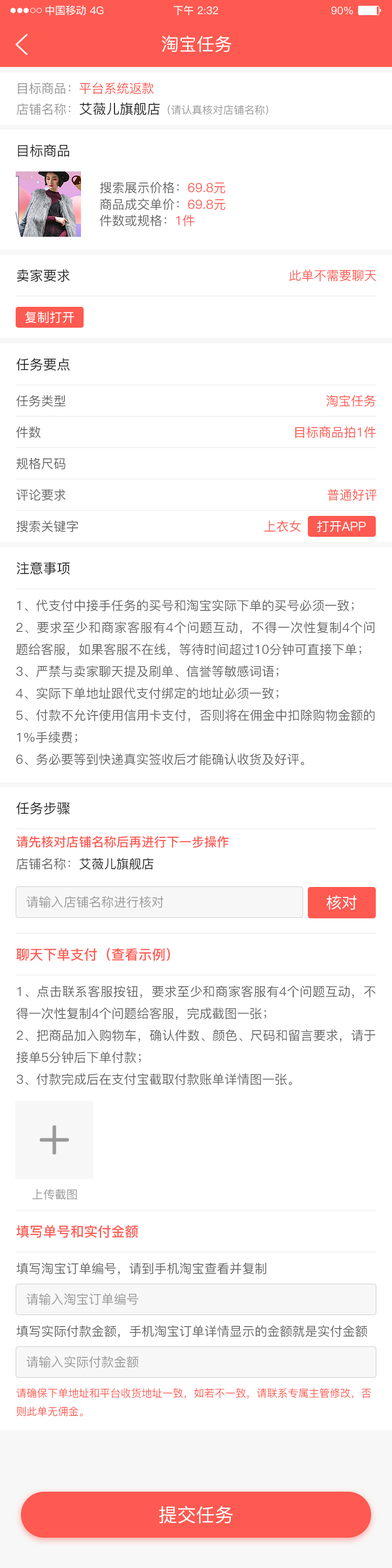
<style>
.page{position:relative;width:392px;height:1568px;background:#ffffff}
.page>*{position:absolute;margin:0}
.t1{font:10.5px "PingFang-SC-Medium";color:#ffffff}
.t2{font:17.8px "PingFang-SC-Medium";color:#ffffff}
.t3{font:12.5px "PingFang-SC-Medium";color:#fe5a51}
.t4{font:12.5px "PingFang-SC-Medium";color:#999999}
.t5{font:10.5px "PingFang-SC-Medium";color:#999999}
.t6{font:13.6px "PingFang-SC-Medium";color:#262626}
.t7{font:12.5px "PingFang-SC-Medium";color:#666666}
.t8{font:12.5px "PingFang-SC-Medium";color:#ffffff}
.t9{font:12.6px "PingFang-SC-Medium";color:#666666}
.t10{font:12.5px "PingFang-SC-Bold";color:#fe5a51}
.t11{font:12.5px "PingFang-SC-Medium";color:#262626}
.t12{font:15.7px "PingFang-SC-Medium";color:#ffffff}
.t13{font:13.6px "PingFang-SC-Bold";color:#fe5a51}
.t14{font:11.5px "PingFang-SC-Medium";color:#999999}
.t15{font:10.5px "PingFang-SC-Medium";color:#fe5a51}
.t16{font:18.8px "PingFang-SC-Medium";color:#ffffff}
</style>
<div class="page">
<p class="t1" style="left:45px;top:5px;width:41px;height:11px">中国移动</p>
<p class="t1" style="left:173px;top:5px;width:45px;height:11px">下午 2:32</p>
<p class="t1" style="left:90px;top:6px;width:13px;height:9px">4G</p>
<p class="t1" style="left:331px;top:6px;width:22px;height:9px">90%</p>
<p class="t2" style="left:162px;top:36px;width:70px;height:16px">淘宝任务</p>
<p class="t3" style="left:18px;top:82px;width:136px;height:12px"><span class="t4">目标商品：</span>平台系统返款</p>
<p class="t5" style="left:17px;top:102px;width:251px;height:14px"><span class="t4">店铺名称：</span><span class="t6">艾薇儿旗舰店</span>（请认真核对店铺名称）</p>
<p class="t6" style="left:18px;top:144px;width:52px;height:13px">目标商品</p>
<p class="t7" style="left:100px;top:182px;width:125px;height:11px">搜索展示价格：<span class="t3">69.8元</span></p>
<p class="t7" style="left:100px;top:198px;width:125px;height:12px">商品成交单价：<span class="t3">69.8元</span></p>
<p class="t7" style="left:100px;top:214px;width:94px;height:12px">件数或规格：<span class="t3">1件</span></p>
<p class="t6" style="left:17px;top:269px;width:53px;height:13px">卖家要求</p>
<p class="t3" style="left:289px;top:269px;width:87px;height:12px">此单不需要聊天</p>
<p class="t8" style="left:25px;top:311px;width:49px;height:12px">复制打开</p>
<p class="t6" style="left:16px;top:358px;width:54px;height:13px">任务要点</p>
<p class="t7" style="left:16px;top:395px;width:49px;height:12px">任务类型</p>
<p class="t3" style="left:326px;top:395px;width:50px;height:12px">淘宝任务</p>
<p class="t7" style="left:16px;top:426px;width:25px;height:12px">件数</p>
<p class="t3" style="left:295px;top:426px;width:81px;height:12px">目标商品拍1件</p>
<p class="t7" style="left:16px;top:458px;width:49px;height:11px">规格尺码</p>
<p class="t7" style="left:16px;top:489px;width:50px;height:12px">评论要求</p>
<p class="t3" style="left:328px;top:489px;width:49px;height:12px">普通好评</p>
<p class="t7" style="left:16px;top:520px;width:62px;height:12px">搜索关键字</p>
<p class="t3" style="left:264px;top:520px;width:37px;height:12px">上衣女</p>
<p class="t8" style="left:317px;top:521px;width:49px;height:11px">打开APP</p>
<p class="t6" style="left:17px;top:562px;width:53px;height:13px">注意事项</p>
<p class="t9" style="left:16px;top:599px;width:359px;height:166px;text-align:justify">1、代支付中接手任务的买号和淘宝实际下单的买号必须一致；<br>2、要求至少和商家客服有4个问题互动，不得一次性复制4个问题给客服，如果客服不在线，等待时间超过10分钟可直接下单；<br>3、严禁与卖家聊天提及刷单、信誉等敏感词语；<br>4、实际下单地址跟代支付绑定的地址必须一致；<br>5、付款不允许使用信用卡支付，否则将在佣金中扣除购物金额的1%手续费；<br>6、务必要等到快递真实签收后才能确认收货及好评。</p>
<p class="t6" style="left:16px;top:802px;width:54px;height:13px">任务步骤</p>
<p class="t10" style="left:16px;top:836px;width:213px;height:12px">请先核对店铺名称后再进行下一步操作</p>
<p class="t11" style="left:16px;top:858px;width:138px;height:12px"><span class="t7">店铺名称：</span>艾薇儿旗舰店</p>
<p class="t4" style="left:26px;top:896px;width:138px;height:12px">请输入店铺名称进行核对</p>
<p class="t12" style="left:327px;top:895px;width:30px;height:15px">核对</p>
<p class="t13" style="left:16px;top:948px;width:154px;height:13px">聊天下单支付（查看示例）</p>
<p class="t9" style="left:16px;top:985px;width:360px;height:100px;text-align:justify">1、点击联系客服按钮，要求至少和商家客服有4个问题互动，不得一次性复制4个问题给客服，完成截图一张；<br>2、把商品加入购物车，确认件数、颜色、尺码和留言要求，请于接单5分钟后下单付款；<br>3、付款完成后在支付宝截取付款账单详情图一张。</p>
<p class="t14" style="left:32px;top:1189px;width:45px;height:11px">上传截图</p>
<p class="t13" style="left:16px;top:1225px;width:122px;height:13px">填写单号和实付金额</p>
<p class="t9" style="left:16px;top:1262px;width:251px;height:13px">填写淘宝订单编号，请到手机淘宝查看并复制</p>
<p class="t4" style="left:26px;top:1293px;width:113px;height:12px">请输入淘宝订单编号</p>
<p class="t9" style="left:16px;top:1325px;width:351px;height:13px">填写实际付款金额，手机淘宝订单详情显示的金额就是实付金额</p>
<p class="t4" style="left:26px;top:1356px;width:113px;height:12px">请输入实际付款金额</p>
<p class="t15" style="left:16px;top:1388px;width:355px;height:28px">请确保下单地址和平台收货地址一致，如若不一致，请联系专属主管修改，否则此单无佣金。</p>
<p class="t16" style="left:159px;top:1506px;width:74px;height:18px">提交任务</p>
</div>
